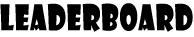
<style>
.page{position:relative;width:194px;height:37px;background:#000000}
.page>*{position:absolute;margin:0}
.t1{font:34.3px "ShowcardGothic-Reg";letter-spacing:0.04em;color:#000000;scale:0.76 1}
</style>
<div class="page">
<p class="t1" style="left:0px;top:3px;width:193px;height:29px">lEADERBOARD</p>
</div>
